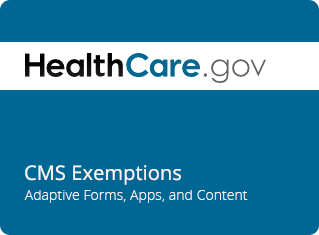
<style>
.page{position:relative;width:319px;height:235px;background:#006694}
.page>*{position:absolute;margin:0}
.t1{font:20px "OpenSans";letter-spacing:0.005em;color:#f7f7f7}
.t2{font:14px "OpenSans-Light";letter-spacing:0.005em;color:#f7f7f7}
</style>
<div class="page">
<p class="t1" style="left:25px;top:165px;width:156px;height:20px">CMS Exemptions</p>
<p class="t2" style="left:24px;top:190px;width:224px;height:13px">Adaptive Forms, Apps, and Content</p>
</div>
